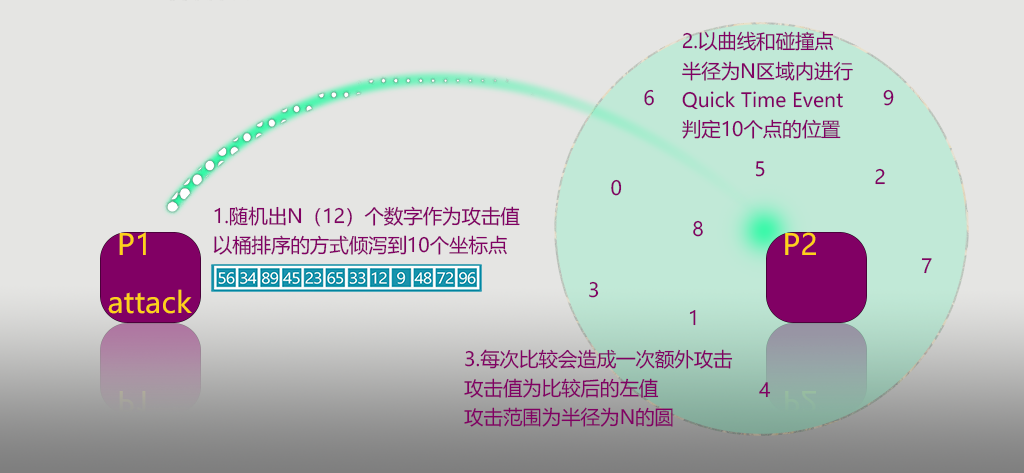
<style>
.page{position:relative;width:1024px;height:473px;background:#e5e5e3}
.page>*{position:absolute;margin:0}
.t1{font:19.4px/29.1px "MicrosoftYaHeiUI";color:#810064}
.t2{font:19.4px "MicrosoftYaHeiUI";color:#810064}
.t3{font:29.1px/29.1px "MicrosoftYaHeiUI";color:#ffd119}
.t4{font:29.1px "MicrosoftYaHeiUI";color:#ffd119}
.t5{font:29.1px "MicrosoftYaHeiUI";color:#a3a09b}
.t6{font:29.1px "MicrosoftYaHeiUI";color:#8fb5a0}
</style>
<div class="page">
<p class="t1" style="left:682px;top:31px;width:171px;height:108px">2.以曲线和碰撞点<br>半径为N区域内进行<br>Quick Time Event <br>判定10个点的位置</p>
<p class="t2" style="left:644px;top:89px;width:10px;height:17px">6</p>
<p class="t2" style="left:883px;top:89px;width:11px;height:17px">9</p>
<p class="t2" style="left:755px;top:161px;width:10px;height:16px">5</p>
<p class="t2" style="left:875px;top:168px;width:10px;height:17px">2</p>
<p class="t2" style="left:611px;top:179px;width:11px;height:17px">0</p>
<p class="t1" style="left:213px;top:206px;width:307px;height:49px">1.随机出N（12）个数字作为攻击值 <br>以桶排序的方式倾泻到10个坐标点</p>
<p class="t2" style="left:693px;top:220px;width:10px;height:17px">8</p>
<p class="t3" style="left:108px;top:232px;width:84px;height:82px">P1<br>  attack</p>
<p class="t4" style="left:785px;top:232px;width:31px;height:23px">P2</p>
<p class="t2" style="left:921px;top:258px;width:11px;height:16px">7</p>
<p class="t2" style="left:589px;top:281px;width:10px;height:17px">3</p>
<p class="t2" style="left:689px;top:310px;width:7px;height:16px">1</p>
<p class="t1" style="left:464px;top:349px;width:269px;height:78px">3.每次比较会造成一次额外攻击<br>攻击值为比较后的左值<br>攻击范围为半径为N的圆</p>
<p class="t2" style="left:759px;top:382px;width:12px;height:16px">4</p>
<p class="t5" style="left:119px;top:391px;width:27px;height:23px">P1</p>
<p class="t6" style="left:785px;top:391px;width:31px;height:23px">P2</p>
</div>
